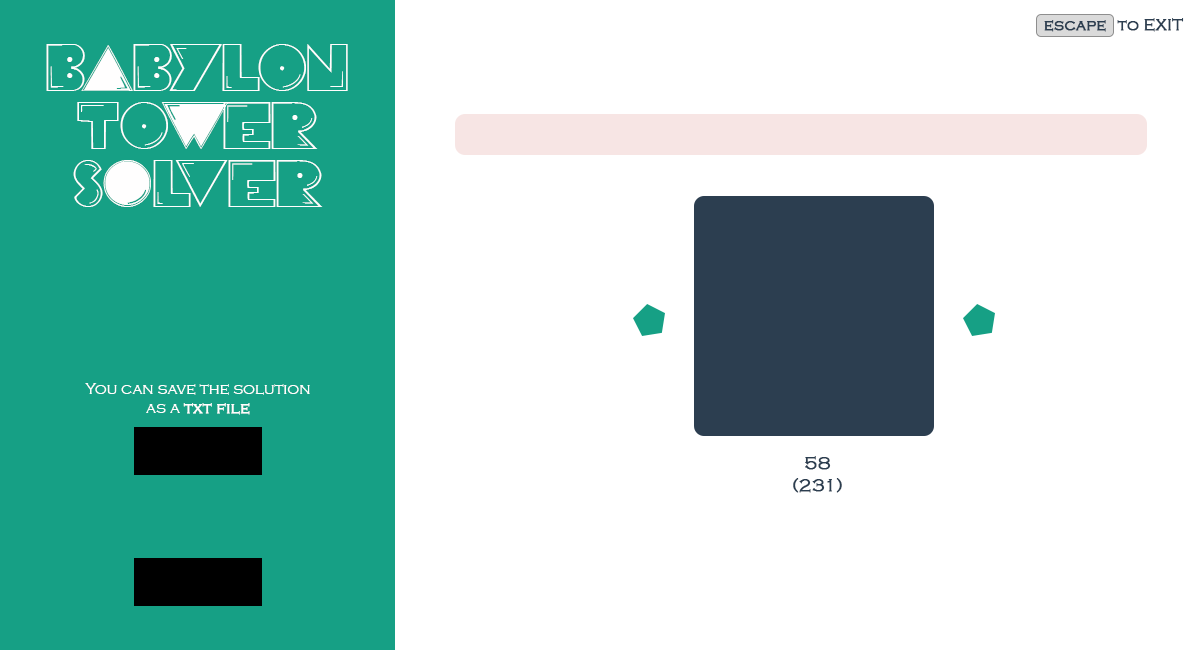
<style>
.page{position:relative;width:1200px;height:650px;background:#ffffff}
.page>*{position:absolute;margin:0}
.t1{font:16px "CopperplateGothic-Light";color:#2c3e50;font-weight:bold}
.t2{font:48px "PacFont";color:#fffefe}
.t3{font:16px "CopperplateGothic-Light";color:#fffefe}
.t4{font:16px "CopperplateGothic-Light";color:#fffefe;font-weight:bold}
.t5{font:18px "CopperplateGothic-Light";color:#2c3e50;font-weight:bold}
</style>
<div class="page">
<p class="t1" style="left:1044px;top:20px;width:62px;height:12px">escape</p>
<p class="t1" style="left:1117px;top:18px;width:67px;height:14px">to EXIT</p>
<p class="t2" style="left:46px;top:44px;width:302px;height:163px;text-align:center">BaBYLON<br>TOwER<br>SoLVER</p>
<p class="t3" style="left:85px;top:383px;width:225px;height:32px;text-align:center">You can save the solution<br>as a <span class="t4">txt file</span></p>
<p class="t5" style="left:793px;top:456px;width:49px;height:37px;text-align:center">58<br>(231)</p>
</div>
